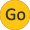
<style>
.page{position:relative;width:30px;height:30px;background:#fec513}
.page>*{position:absolute;margin:0}
.t1{font:18px "Calibri";color:#333333}
</style>
<div class="page">
<p class="t1" style="left:5px;top:8px;width:21px;height:13px">Go</p>
</div>
